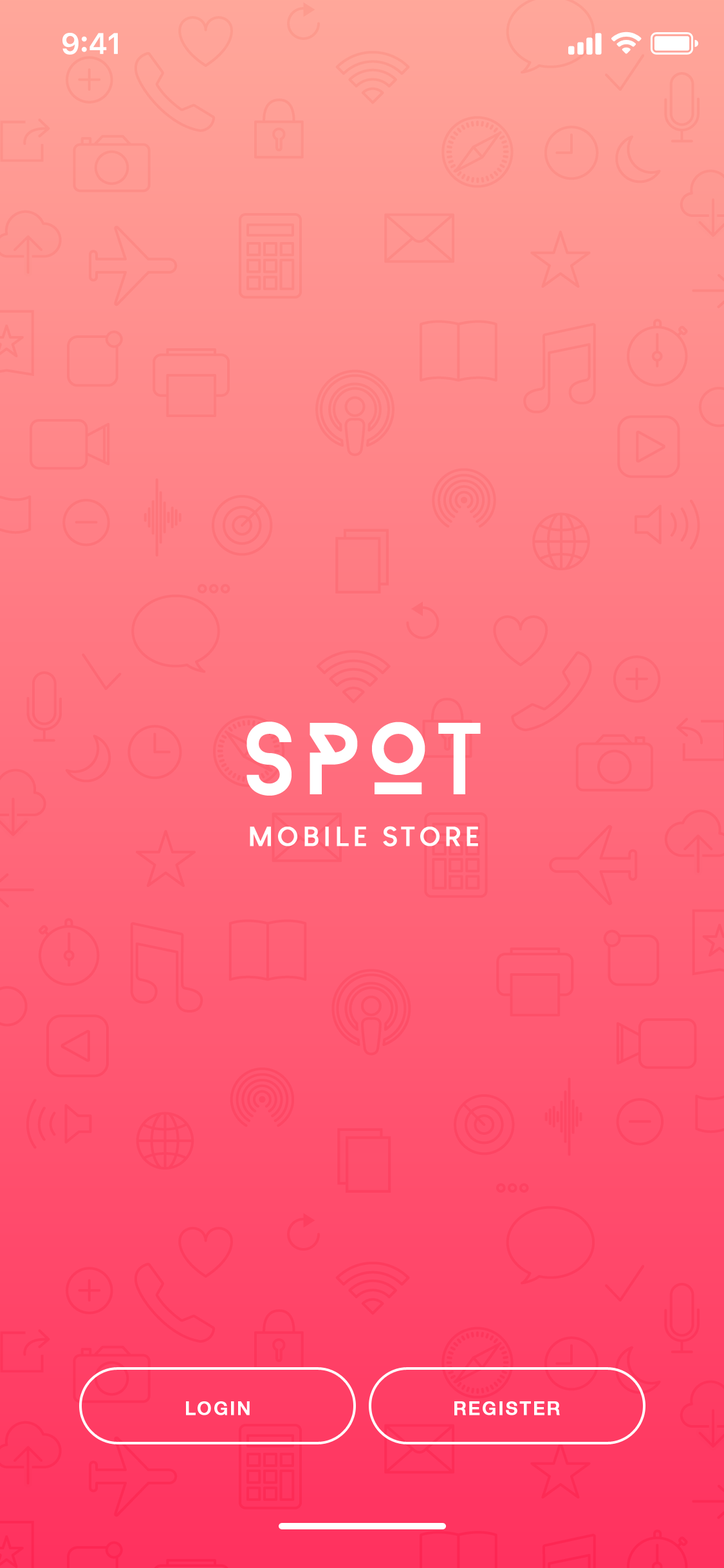
<style>
.page{position:relative;width:724px;height:1568px}
.page>*{position:absolute;margin:0}
.t1{font:101.9px "BaronNeue";letter-spacing:0.05em;color:#ffffff}
.t2{font:26.8px "LouisGeorgeCafe-Bold";letter-spacing:0.14em;color:#ffffff;text-transform:uppercase;font-weight:bold}
.t3{font:18.8px "HelveticaNeue-Medium";letter-spacing:0.08em;color:#ffffff;font-weight:bold}
</style>
<div class="page">
<p class="t1" style="left:247px;top:722px;width:234px;height:74px">SPOT</p>
<p class="t2" style="left:250px;top:826px;width:228px;height:20px">Mobile STORE</p>
<p class="t3" style="left:186px;top:1401px;width:64px;height:14px">LOGIN</p>
<p class="t3" style="left:454px;top:1401px;width:106px;height:14px">REGISTER</p>
</div>
